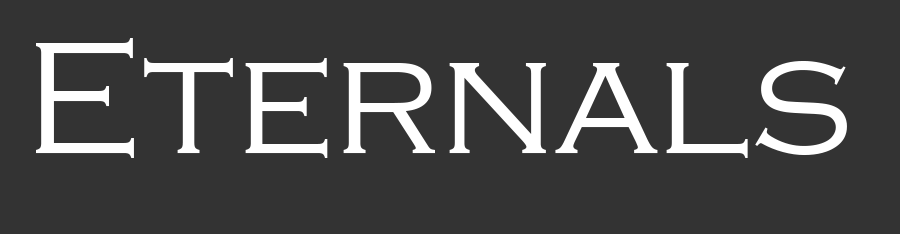
<style>
.page{position:relative;width:900px;height:234px;background:#333333}
.page>*{position:absolute;margin:0}
.t1{font:165px "CopperplateGothic-Light";color:#ffffff}
</style>
<div class="page">
<p class="t1" style="left:36px;top:38px;width:811px;height:120px">Eternals</p>
</div>
